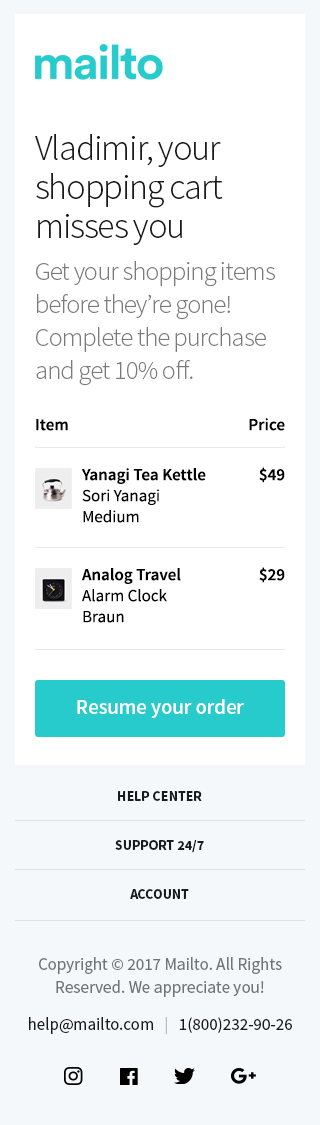
<style>
.page{position:relative;width:320px;height:1125px;background:#ffffff}
.page>*{position:absolute;margin:0}
.t1{font:36px/39px "SourceSansPro-Light";letter-spacing:-0.03em;color:#1a1a1a}
.t2{font:26px/33px "SourceSansPro-Light";letter-spacing:-0.027em;color:#7b7b7b}
.t3{font:17px "SourceSansPro-Semibold";color:#000000}
.t4{font:17px/21px "SourceSansPro-Regular";color:#000000}
.t5{font:17px/21px "SourceSansPro-Semibold";color:#000000}
.t6{font:21px "SourceSansPro-Semibold";letter-spacing:-0.009em;color:#ffffff}
.t7{font:14px/49px "SourceSansPro-Bold";color:#1a1a1a}
.t8{font:17px/23px "SourceSansPro-Regular";color:#727374}
.t9{font:17px/23px "SourceSansPro-Regular";color:#1a1a1a}
.t10{font:17px/23px "SourceSansPro-Regular";color:#bebebe}
</style>
<div class="page">
<p class="t1" style="left:35px;top:134px;width:188px;height:111px">Vladimir, your shopping cart misses you</p>
<p class="t2" style="left:36px;top:261px;width:239px;height:125px">Get your shopping items before they’re gone! Complete the purchase and get 10% off.</p>
<p class="t3" style="left:36px;top:419px;width:32px;height:12px">Item</p>
<p class="t3" style="left:249px;top:418px;width:36px;height:13px">Price</p>
<p class="t4" style="left:81px;top:468px;width:125px;height:55px"><span class="t5">Yanagi Tea Kettle<br></span>Sori Yanagi<br>Medium</p>
<p class="t3" style="left:259px;top:467px;width:26px;height:16px">$49</p>
<p class="t4" style="left:81px;top:568px;width:100px;height:55px"><span class="t5">Analog Travel </span>Alarm Clock<br>Braun</p>
<p class="t3" style="left:259px;top:567px;width:26px;height:16px">$29</p>
<p class="t6" style="left:77px;top:699px;width:167px;height:19px">Resume your order</p>
<p class="t7" style="left:115px;top:791px;width:89px;height:108px;text-align:center">HELP CENTER<br>SUPPORT 24/7<br>ACCOUNT</p>
<p class="t8" style="left:29px;top:957px;width:263px;height:78px;text-align:center">Copyright © 2017 Mailto. All Rights Reserved. We appreciate you!<br><span class="t9">help@mailto.com   </span><span class="t10">|   </span><span class="t9">1(800)232-90-26</span></p>
</div>
